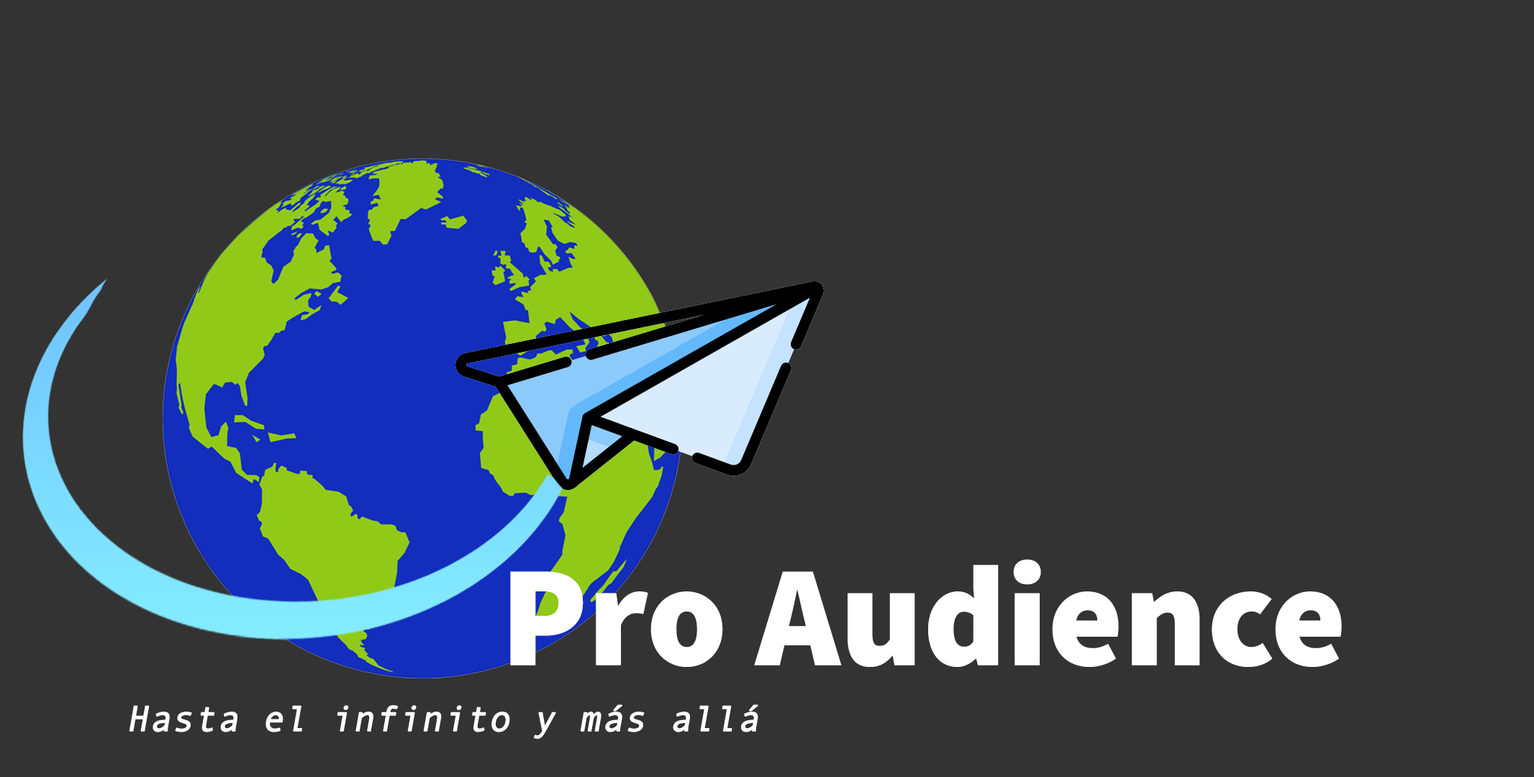
<style>
.page{position:relative;width:1534px;height:777px;background:#333333}
.page>*{position:absolute;margin:0}
.t1{font:143.9px "SourceSansRoman-Black";color:#ffffff;font-weight:bold;font-style:italic}
.t2{font:36px "AndaleMono";color:#ffffff;font-weight:bold;font-style:italic}
</style>
<div class="page">
<p class="t1" style="left:510px;top:559px;width:832px;height:108px">Pro Audience</p>
<p class="t2" style="left:129px;top:705px;width:629px;height:34px">Hasta el infinito y más allá</p>
</div>
